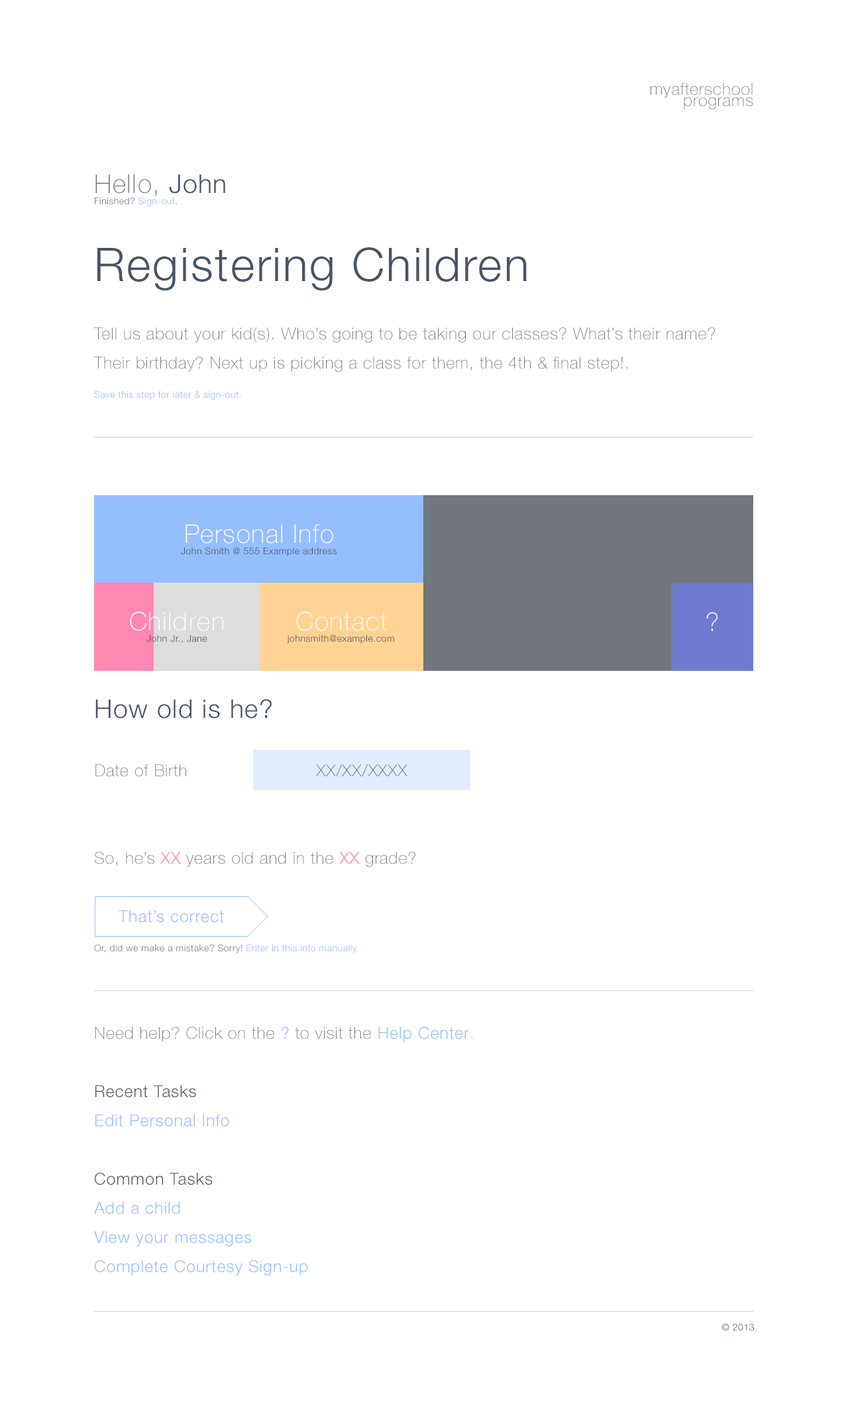
<style>
.page{position:relative;width:848px;height:1406px;background:#ffffff}
.page>*{position:absolute;margin:0}
.t1{font:16.6px/11.3px "HelveticaNeueLTStd-Th";letter-spacing:0.039em;color:#71767f}
.t2{font:9.3px/11.3px "HelveticaNeueLTStd-Lt";letter-spacing:0.039em;color:#71767f}
.t3{font:25.8px/11.3px "HelveticaNeueLTStd-Th";letter-spacing:0.039em;color:#71767f}
.t4{font:25.8px/11.3px "HelveticaNeueLTStd-Lt";letter-spacing:0.039em;color:#475466}
.t5{font:9.3px/11.3px "HelveticaNeueLTStd-Lt";letter-spacing:0.039em;color:#95beff}
.t6{font:16.6px/29.2px "HelveticaNeueLTStd-Th";letter-spacing:0.039em;color:#71767f}
.t7{font:46.4px/29.2px "HelveticaNeueLTStd-Lt";letter-spacing:0.039em;color:#475466}
.t8{font:9.3px/29.2px "HelveticaNeueLTStd-Lt";letter-spacing:0.039em;color:#95beff}
.t9{font:9.3px/11.3px "HelveticaNeueLTStd-Lt";letter-spacing:0.039em;color:#475467}
.t10{font:25.8px/29.2px "HelveticaNeueLTStd-Th";letter-spacing:0.039em;color:#ffffff}
.t11{font:25.8px/11.3px "HelveticaNeueLTStd-Th";letter-spacing:0.039em;color:#ffffff}
.t12{font:25.8px "HelveticaNeueLTStd-Th";letter-spacing:0.039em;color:#ffffff}
.t13{font:25.8px "HelveticaNeueLTStd-Lt";letter-spacing:0.039em;color:#475467}
.t14{font:16.6px "HelveticaNeueLTStd-Th";letter-spacing:0.039em;color:#71767f}
.t15{font:16.6px "HelveticaNeueLTStd-Lt";letter-spacing:0.039em;color:#ff87b2}
.t16{font:16.6px "HelveticaNeueLTStd-Lt";letter-spacing:0.039em;color:#95beff}
.t17{font:9.3px "HelveticaNeueLTStd-Lt";letter-spacing:0.039em;color:#71767f}
.t18{font:9.3px "HelveticaNeueLTStd-Lt";letter-spacing:0.039em;color:#95beff}
.t19{font:16.6px/29.2px "HelveticaNeueLTStd-Lt";letter-spacing:0.039em;color:#95beff}
.t20{font:16.6px/29.2px "HelveticaNeueLTStd-Th";letter-spacing:0.039em;color:#95beff}
.t21{font:16.6px/29.2px "HelveticaNeueLTStd-Lt";letter-spacing:0.039em;color:#475467}
.t22{font:9.3px "HelveticaNeueLTStd-Lt";letter-spacing:0.039em;color:#475467}
</style>
<div class="page">
<p class="t1" style="left:651px;top:83px;width:103px;height:26px;text-align:right">myafterschool<br>programs</p>
<p class="t2" style="left:95px;top:174px;width:130px;height:32px"><span class="t3">Hello, </span><span class="t4">John<br></span>Finished? <span class="t5">Sign-out</span>.</p>
<p class="t6" style="left:93px;top:247px;width:622px;height:153px"><span class="t7">Registering Children<br><br></span>Tell us about your kid(s). Who’s going to be taking our classes? What’s their name? Their birthday? Next up is picking a class for them, the 4th &amp; final step!.<br><span class="t8">Save this step for later &amp; sign-out.</span></p>
<p class="t9" style="left:181px;top:524px;width:156px;height:32px;text-align:center"><span class="t10">Personal Info<br></span>John Smith @ 555 Example address</p>
<p class="t9" style="left:287px;top:611px;width:107px;height:33px;text-align:center"><span class="t11">Contact<br></span>johnsmith@example.com</p>
<p class="t12" style="left:706px;top:612px;width:12px;height:19px">?</p>
<p class="t13" style="left:95px;top:699px;width:177px;height:19px">How old is he?</p>
<p class="t14" style="left:95px;top:764px;width:91px;height:13px">Date of Birth</p>
<p class="t14" style="left:316px;top:764px;width:92px;height:13px">XX/XX/XXXX</p>
<p class="t14" style="left:95px;top:852px;width:321px;height:15px">So, he’s <span class="t15">XX</span> years old and in the <span class="t15">XX</span> grade?</p>
<p class="t16" style="left:119px;top:910px;width:105px;height:13px">That’s correct</p>
<p class="t17" style="left:94px;top:944px;width:264px;height:9px">Or, did we make a mistake? Sorry!<span class="t18"> Enter in this info manually.</span></p>
<p class="t19" style="left:93px;top:1027px;width:380px;height:249px"><span class="t6">Need help? Click on the </span>? <span class="t6">to visit the </span>Help Center<span class="t20">.<br><br></span><span class="t21">Recent Tasks<br></span>Edit Personal Info<br><br><span class="t21">Common Tasks<br></span>Add a child<br>View your messages<br>Complete Courtesy Sign-up</p>
<p class="t22" style="left:722px;top:1323px;width:32px;height:8px">© 2013</p>
</div>
